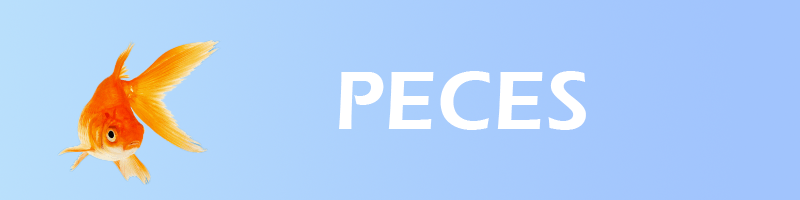
<style>
.page{position:relative;width:800px;height:200px}
.page>*{position:absolute;margin:0}
.t1{font:86.2px "ErasITC-Demi";color:#ffffff}
</style>
<div class="page">
<p class="t1" style="left:339px;top:71px;width:247px;height:59px">PECES</p>
</div>
